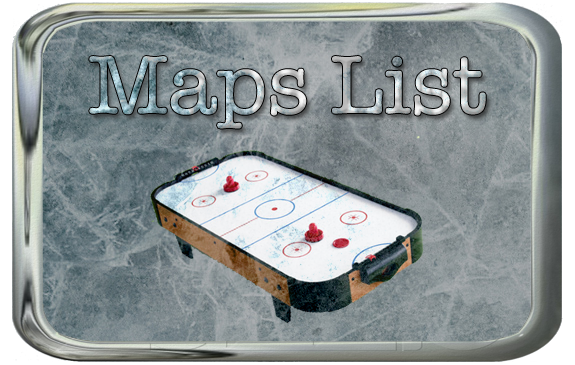
<style>
.page{position:relative;width:575px;height:365px}
.page>*{position:absolute;margin:0}
.t1{font:85px "AmericanTypewriter"}
</style>
<div class="page">
<p class="t1" style="left:89px;top:56px;width:397px;height:73px">Maps List</p>
</div>
